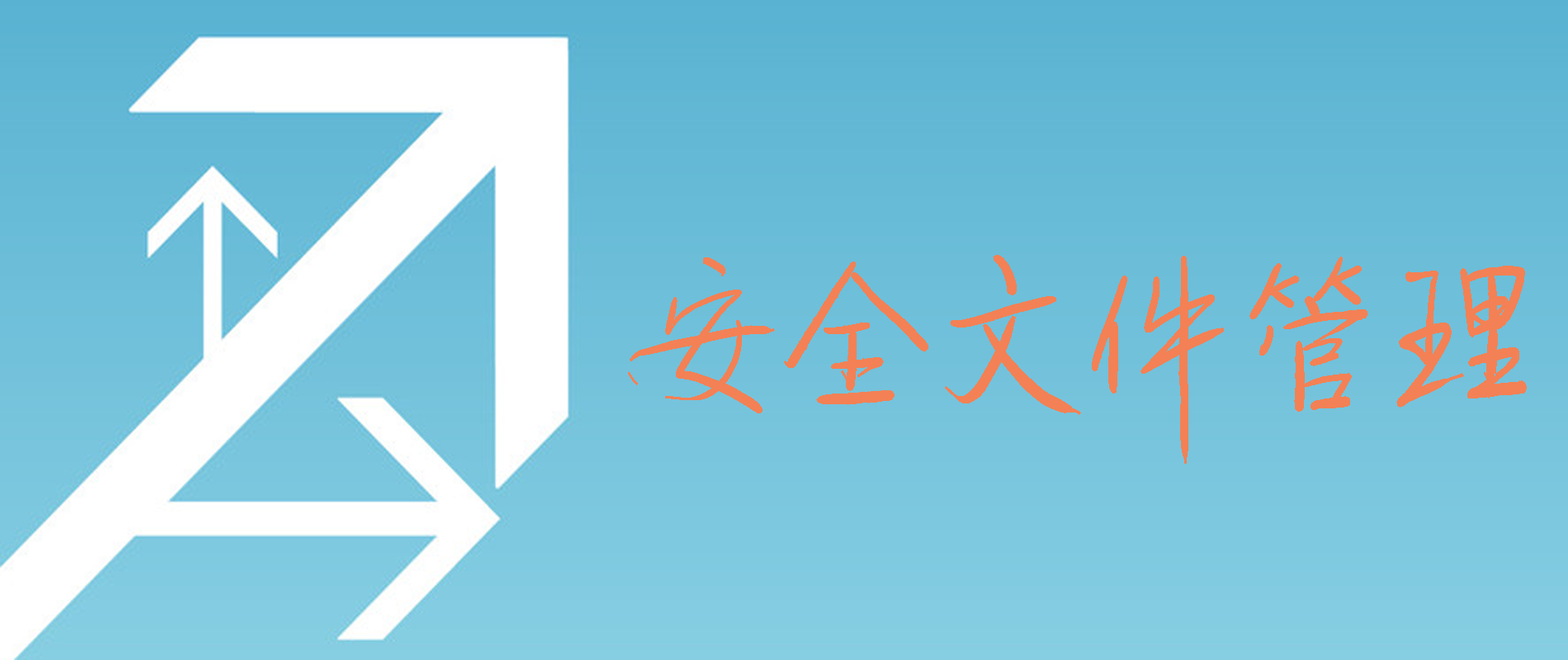
<style>
.page{position:relative;width:1568px;height:660px}
.page>*{position:absolute;margin:0}
.t1{font:192.1px "-";color:#f38155;scale:0.81 1}
</style>
<div class="page">
<p class="t1" style="left:628px;top:255px;width:899px;height:209px">安全文件管理</p>
</div>
